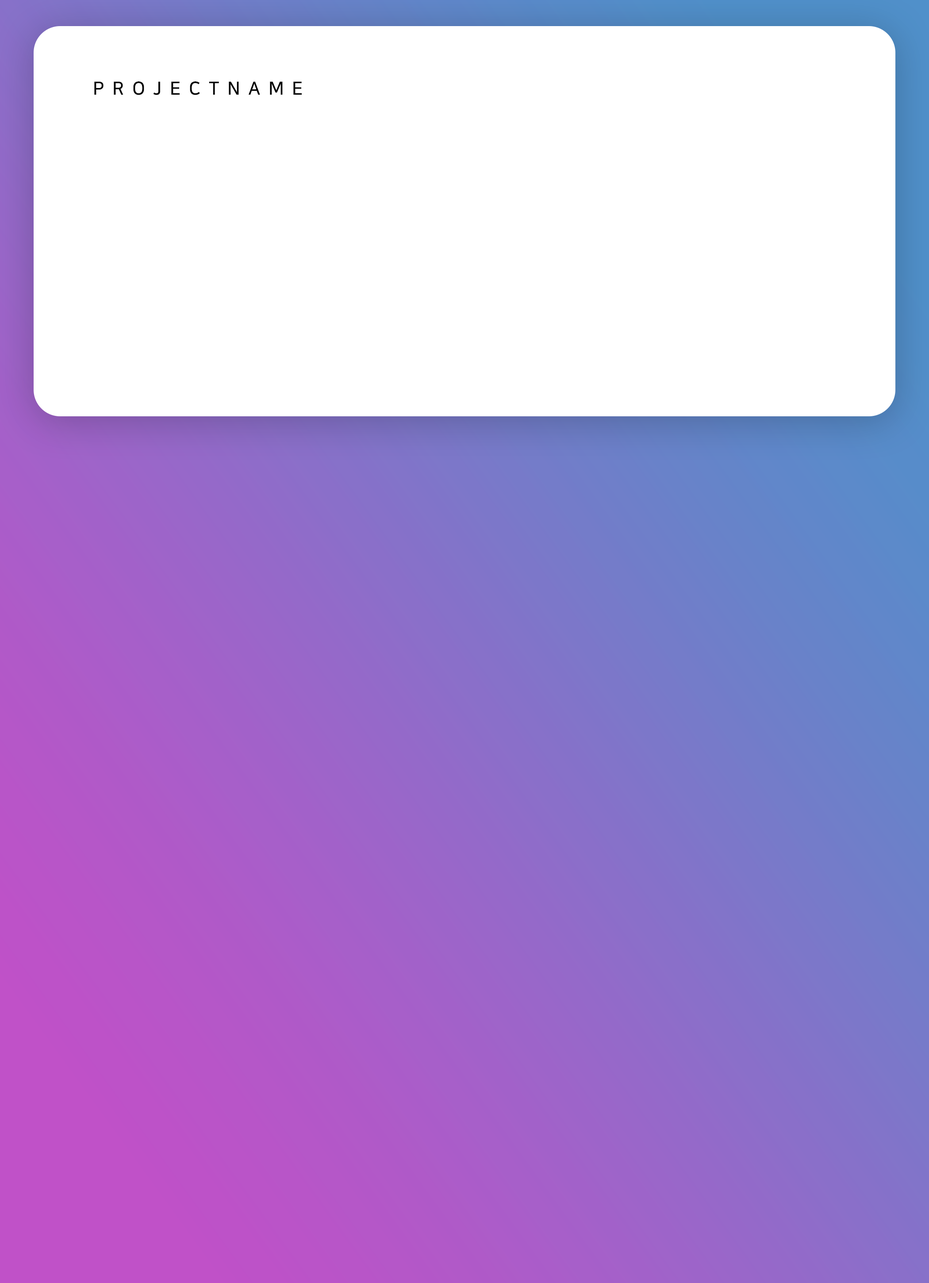
<style>
.page{position:relative;width:929px;height:1283px;background:#ffffff}
.page>*{position:absolute;margin:0}
.t1{font:18.1px "NanumSquareB";letter-spacing:0.45em;color:#000000}
</style>
<div class="page">
<p class="t1" style="left:94px;top:81px;width:208px;height:14px">PROJECTNAME</p>
</div>
